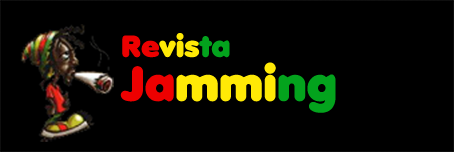
<style>
.page{position:relative;width:454px;height:152px;background:#000000}
.page>*{position:absolute;margin:0}
.t1{font:30px "Debussy";color:#ffea06}
.t2{font:30px "Debussy";color:#ee0000}
.t3{font:30px "Debussy";color:#03a31d}
.t4{font:48px "Debussy";color:#ffea06}
.t5{font:48px "Debussy";color:#ee0000}
.t6{font:48px "Debussy";color:#03a31d}
</style>
<div class="page">
<p class="t1" style="left:122px;top:33px;width:108px;height:25px"><span class="t2">Re</span>vis<span class="t3">ta</span></p>
<p class="t4" style="left:120px;top:62px;width:216px;height:51px"><span class="t5">Ja</span>mmi<span class="t6">ng</span></p>
</div>
